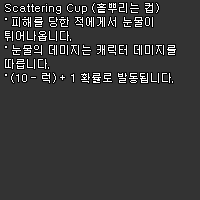
<style>
.page{position:relative;width:200px;height:200px;background:#333333}
.page>*{position:absolute;margin:0}
.t1{font:11px/14px "Dotum";color:#ffffff}
</style>
<div class="page">
<p class="t1" style="left:5px;top:3px;width:171px;height:80px">Scattering Cup (흩뿌리는 컵)<br>˚ 피해를 당한 적에게서 눈물이<br>튀어나옵니다.<br>˚ 눈물의 데미지는 캐릭터 데미지를<br>따릅니다.<br>˚ (10 - 럭) + 1 확률로 발동됩니다.</p>
</div>
